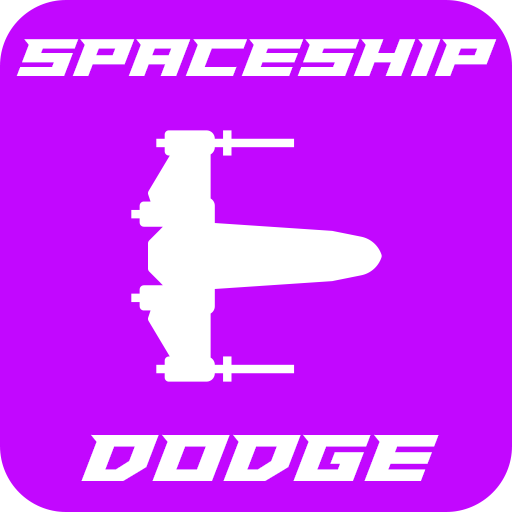
<style>
.page{position:relative;width:512px;height:512px;background:#c207ff}
.page>*{position:absolute;margin:0}
.t1{font:56.8px "Paladins";color:#ffffff}
.t2{font:71.3px "Paladins";color:#ffffff}
</style>
<div class="page">
<p class="t1" style="left:16px;top:39px;width:481px;height:37px">SPACEship</p>
<p class="t2" style="left:81px;top:434px;width:358px;height:47px">dodge</p>
</div>
